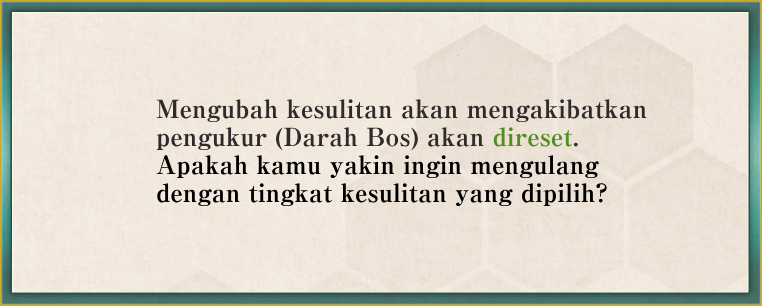
<style>
.page{position:relative;width:762px;height:306px}
.page>*{position:absolute;margin:0}
.t1{font:25px/28px "RyuminPro-ExBold";color:#000000}
.t2{font:25px/28px "RyuminPro-ExBold";color:#302b2b}
.t3{font:25px/28px "RyuminPro-ExBold";color:#538d20}
</style>
<div class="page">
<p class="t1" style="left:156px;top:99px;width:491px;height:108px"><span class="t2">Mengubah kesulitan akan mengakibatkan<br>pengukur (Darah Bos) akan </span><span class="t3">direset</span><span class="t2">.<br></span>Apakah kamu yakin ingin mengulang <br>dengan tingkat kesulitan yang dipilih?</p>
</div>
